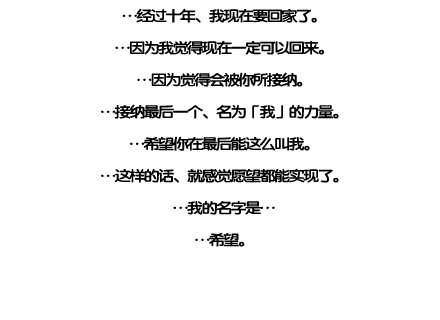
<style>
.page{position:relative;width:440px;height:320px;background:#ffffff}
.page>*{position:absolute;margin:0}
.t1{font:14.7px/32px "FZY4K--GBK1-0";letter-spacing:-0.13em;color:#000000;scale:1.14 1}
</style>
<div class="page">
<p class="t1" style="left:101px;top:8px;width:238px;height:239px;text-align:center">…经过十年、我现在要回家了。<br>…因为我觉得现在一定可以回来。<br>…因为觉得会被你所接纳。<br>…接纳最后一个、名为「我」的力量。<br>…希望你在最后能这么叫我。<br>…这样的话、就感觉愿望都能实现了。<br>…我的名字是…<br>…希望。</p>
</div>
